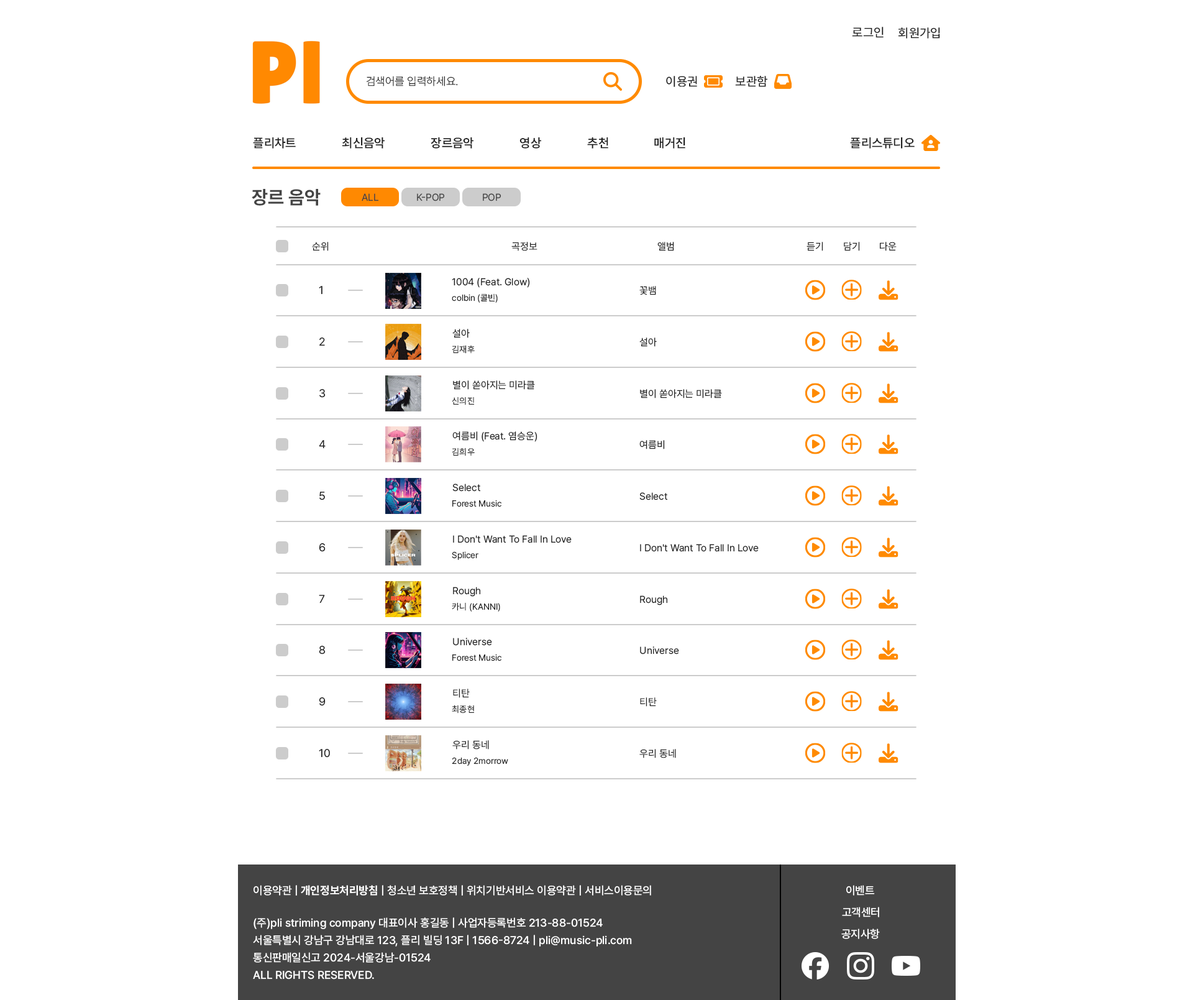
<style>
.page{position:relative;width:1193px;height:1000px;background:#ffffff}
.page>*{position:absolute;margin:0}
.t1{font:12.4px "Pretendard-Medium";color:#222222}
.t2{font:11.2px "Pretendard-Light";color:#222222}
.t3{font:12.4px "Pretendard-SemiBold";color:#222222}
.t4{font:18.6px "Pretendard-Bold";color:#444444}
.t5{font:9.9px "Pretendard-Regular";color:#444444}
.t6{font:9.9px "Pretendard-Regular";color:#222222}
.t7{font:11.2px "Pretendard-Regular";color:#222222}
.t8{font:8.7px "Pretendard-Regular";color:#222222}
.t9{font:11.2px "Pretendard-Medium";color:#ffffff}
.t10{font:11.2px "Pretendard-Bold";color:#ffffff}
.t11{font:11.2px/17.4px "Pretendard-Medium";color:#ffffff}
</style>
<div class="page">
<p class="t1" style="left:852px;top:27px;width:31px;height:11px">로그인</p>
<p class="t1" style="left:898px;top:27px;width:42px;height:12px">회원가입</p>
<p class="t2" style="left:366px;top:76px;width:92px;height:10px">검색어를 입력하세요.</p>
<p class="t1" style="left:666px;top:76px;width:31px;height:11px">이용권</p>
<p class="t1" style="left:735px;top:76px;width:32px;height:11px">보관함</p>
<p class="t3" style="left:253px;top:137px;width:43px;height:11px">플리차트</p>
<p class="t3" style="left:342px;top:137px;width:43px;height:11px">최신음악</p>
<p class="t3" style="left:431px;top:137px;width:42px;height:11px">장르음악</p>
<p class="t3" style="left:519px;top:137px;width:22px;height:11px">영상</p>
<p class="t3" style="left:587px;top:137px;width:21px;height:11px">추천</p>
<p class="t3" style="left:654px;top:137px;width:31px;height:11px">매거진</p>
<p class="t3" style="left:850px;top:137px;width:65px;height:11px">플리스튜디오</p>
<p class="t4" style="left:252px;top:189px;width:69px;height:17px">장르 음악</p>
<p class="t5" style="left:362px;top:193px;width:16px;height:8px">ALL</p>
<p class="t5" style="left:417px;top:193px;width:28px;height:8px">K-POP</p>
<p class="t5" style="left:483px;top:193px;width:18px;height:8px">POP</p>
<p class="t6" style="left:312px;top:242px;width:17px;height:9px">순위</p>
<p class="t6" style="left:511px;top:242px;width:26px;height:9px">곡정보</p>
<p class="t6" style="left:657px;top:242px;width:17px;height:9px">앨범</p>
<p class="t6" style="left:806px;top:242px;width:17px;height:9px">듣기</p>
<p class="t6" style="left:844px;top:242px;width:16px;height:9px">담기</p>
<p class="t6" style="left:880px;top:242px;width:17px;height:9px">다운</p>
<p class="t6" style="left:452px;top:278px;width:78px;height:10px">1004 (Feat. Glow)</p>
<p class="t7" style="left:319px;top:286px;width:3px;height:8px">1</p>
<p class="t8" style="left:452px;top:293px;width:46px;height:10px">colbin (콜빈)</p>
<p class="t6" style="left:639px;top:286px;width:17px;height:9px">꽃뱀</p>
<p class="t6" style="left:452px;top:329px;width:18px;height:9px">설아</p>
<p class="t7" style="left:319px;top:337px;width:6px;height:9px">2</p>
<p class="t6" style="left:639px;top:337px;width:18px;height:10px">설아</p>
<p class="t8" style="left:452px;top:345px;width:23px;height:9px">김재후</p>
<p class="t7" style="left:319px;top:389px;width:7px;height:9px">3</p>
<p class="t6" style="left:453px;top:380px;width:82px;height:10px">별이 쏟아지는 미라클</p>
<p class="t6" style="left:640px;top:389px;width:82px;height:9px">별이 쏟아지는 미라클</p>
<p class="t8" style="left:452px;top:396px;width:22px;height:9px">신의진</p>
<p class="t6" style="left:452px;top:431px;width:85px;height:11px">여름비 (Feat. 염승운)</p>
<p class="t7" style="left:319px;top:440px;width:7px;height:9px">4</p>
<p class="t8" style="left:452px;top:447px;width:23px;height:9px">김희우</p>
<p class="t6" style="left:639px;top:440px;width:26px;height:9px">여름비</p>
<p class="t6" style="left:452px;top:483px;width:28px;height:8px">Select</p>
<p class="t7" style="left:319px;top:491px;width:6px;height:9px">5</p>
<p class="t6" style="left:639px;top:492px;width:28px;height:8px">Select</p>
<p class="t8" style="left:452px;top:500px;width:49px;height:7px">Forest Music</p>
<p class="t7" style="left:319px;top:543px;width:7px;height:9px">6</p>
<p class="t6" style="left:453px;top:535px;width:119px;height:8px">I Don't Want To Fall In Love</p>
<p class="t6" style="left:640px;top:544px;width:119px;height:8px">I Don't Want To Fall In Love</p>
<p class="t8" style="left:452px;top:551px;width:26px;height:9px">Splicer</p>
<p class="t6" style="left:453px;top:586px;width:27px;height:10px">Rough</p>
<p class="t7" style="left:319px;top:595px;width:6px;height:8px">7</p>
<p class="t8" style="left:452px;top:602px;width:48px;height:9px">카니 (KANNI)</p>
<p class="t6" style="left:640px;top:595px;width:27px;height:10px">Rough</p>
<p class="t6" style="left:453px;top:637px;width:39px;height:9px">Universe</p>
<p class="t7" style="left:319px;top:646px;width:7px;height:8px">8</p>
<p class="t8" style="left:452px;top:654px;width:49px;height:7px">Forest Music</p>
<p class="t6" style="left:640px;top:646px;width:39px;height:8px">Universe</p>
<p class="t6" style="left:453px;top:688px;width:17px;height:10px">티탄</p>
<p class="t7" style="left:319px;top:697px;width:7px;height:9px">9</p>
<p class="t6" style="left:640px;top:697px;width:17px;height:9px">티탄</p>
<p class="t8" style="left:452px;top:705px;width:22px;height:8px">최종현</p>
<p class="t7" style="left:319px;top:749px;width:11px;height:8px">10</p>
<p class="t6" style="left:452px;top:740px;width:37px;height:9px">우리 동네</p>
<p class="t6" style="left:639px;top:749px;width:37px;height:9px">우리 동네</p>
<p class="t8" style="left:452px;top:757px;width:56px;height:8px">2day 2morrow</p>
<p class="t9" style="left:253px;top:885px;width:398px;height:10px">이용약관 | <span class="t10">개인정보처리방침</span> | 청소년 보호정책 | 위치기반서비스 이용약관 | 서비스이용문의</p>
<p class="t9" style="left:846px;top:885px;width:29px;height:10px">이벤트</p>
<p class="t11" style="left:253px;top:917px;width:379px;height:62px">(주)pli striming company 대표이사 홍길동 | 사업자등록번호 213-88-01524<br>서울특별시 강남구 강남대로 123, 플리 빌딩 13F | 1566-8724 | pli@music-pli.com<br>통신판매일신고 2024-서울강남-01524      <br>ALL RIGHTS RESERVED.</p>
<p class="t9" style="left:842px;top:906px;width:37px;height:11px">고객센터</p>
<p class="t9" style="left:841px;top:928px;width:39px;height:11px">공지사항</p>
</div>
